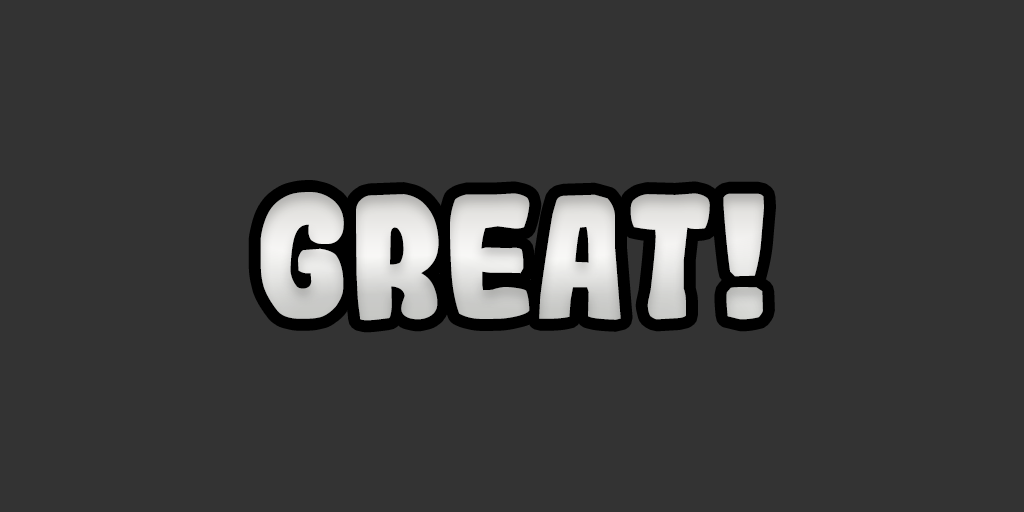
<style>
.page{position:relative;width:1024px;height:512px;background:#333333}
.page>*{position:absolute;margin:0}
.t1{font:166.7px "Gogono-Cocoa-Mochi"}
</style>
<div class="page">
<p class="t1" style="left:260px;top:192px;width:504px;height:129px">GREAT!</p>
</div>
